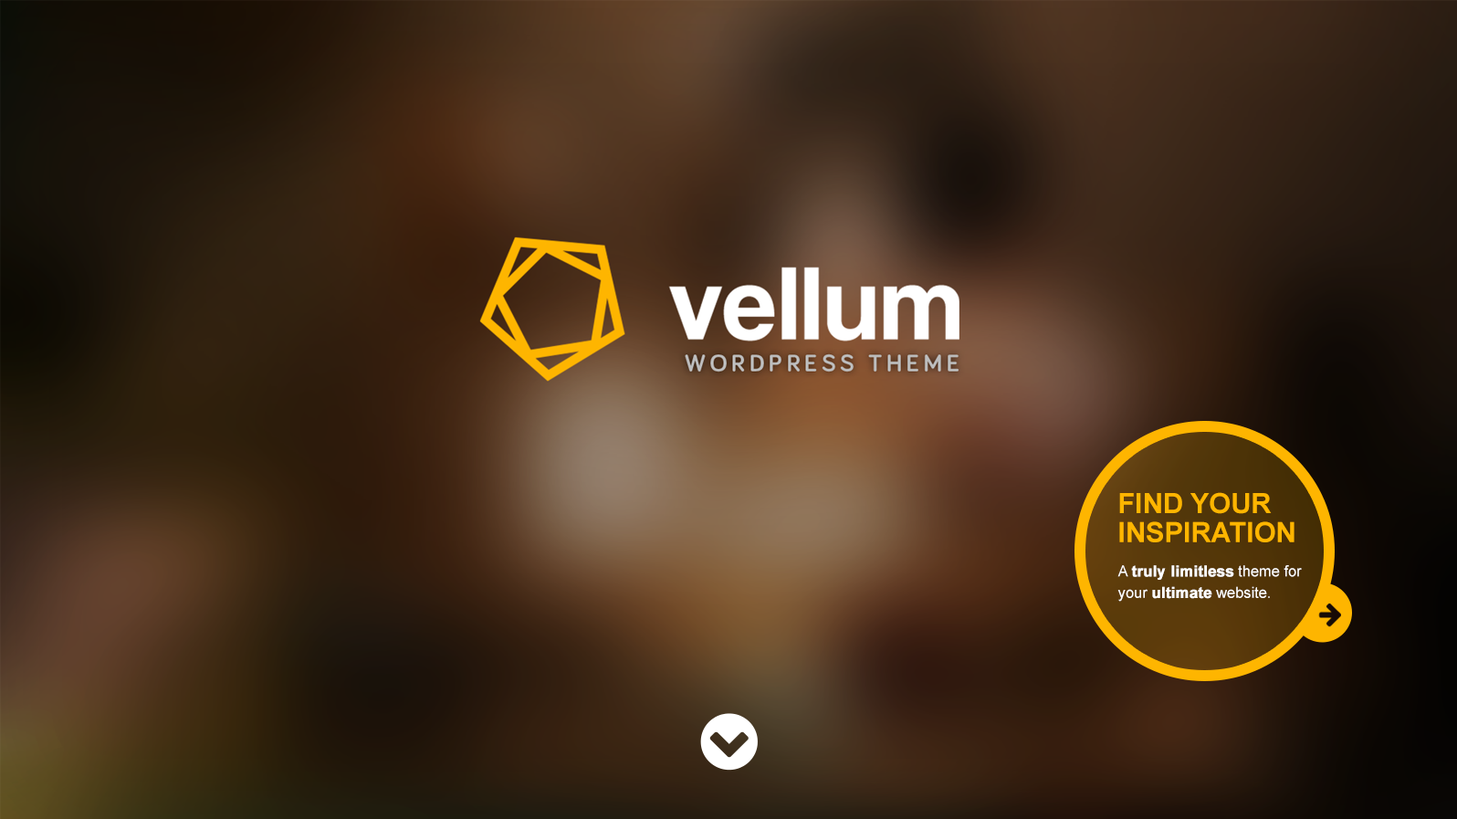
<style>
.page{position:relative;width:1457px;height:819px}
.page>*{position:absolute;margin:0}
.t1{font:28.1px/28.9px "Arial-BoldMT";color:#feb500;text-transform:uppercase}
.t2{font:15px/21.5px "Arial-BoldMT";color:#ffffff;font-weight:bold}
.t3{font:15px/21.5px "ArialMT";color:#ffffff}
</style>
<div class="page">
<p class="t1" style="left:1119px;top:492px;width:175px;height:50px">Find your<br>inspiration</p>
<p class="t2" style="left:1117px;top:565px;width:184px;height:36px"><span class="t3">A </span>truly limitless<span class="t3"> theme for<br>your </span>ultimate<span class="t3"> website.</span></p>
</div>
